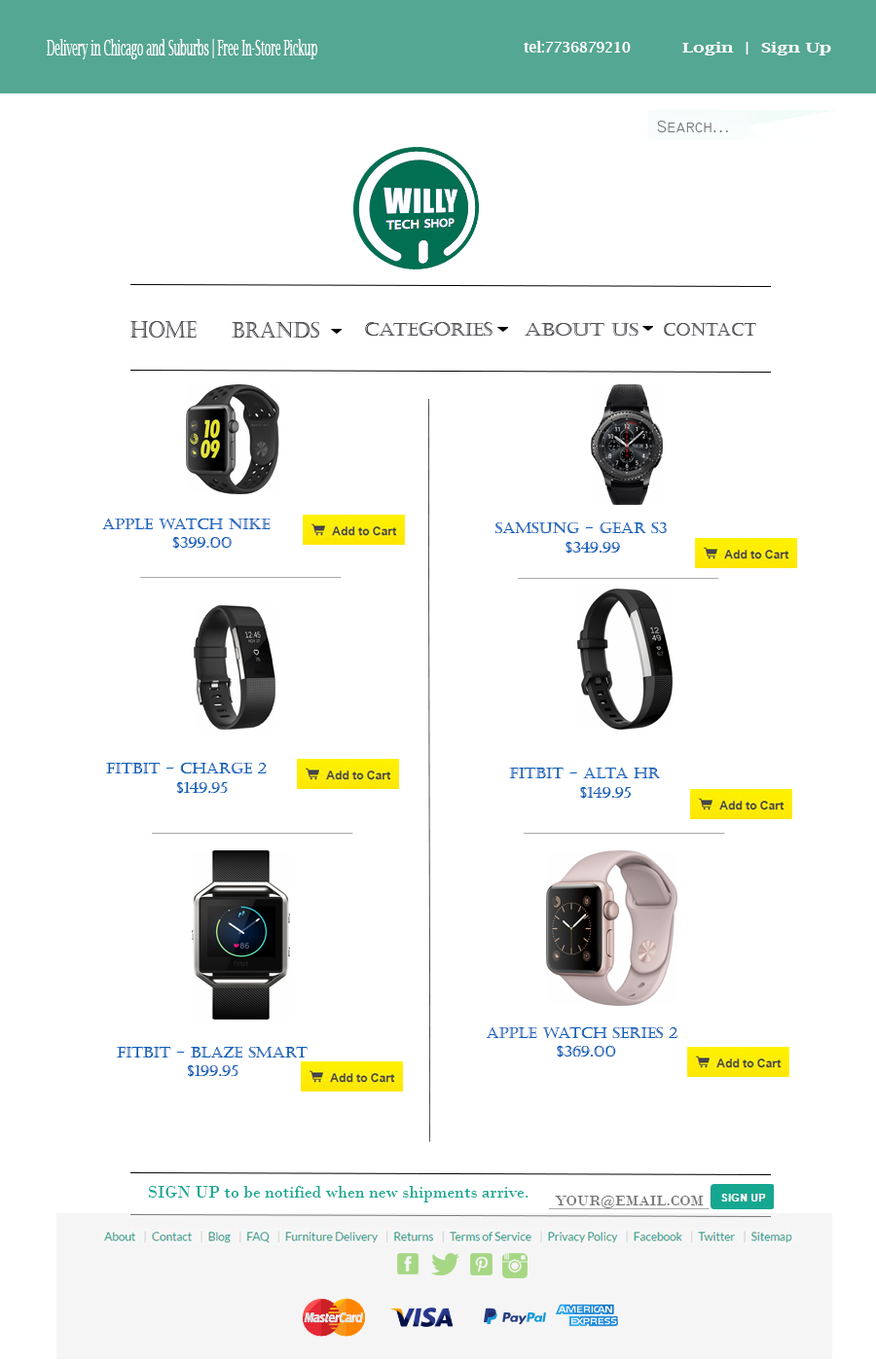
<style>
.page{position:relative;width:876px;height:1362px;background:#ffffff}
.page>*{position:absolute;margin:0}
.t1{font:21.8px "LucidaBright";color:#ffffff;scale:0.47 1}
.t2{font:14.5px "LucidaBright-Demi";color:#ffffff;scale:0.95 1}
.t3{font:13.9px "LucidaBright-Demi";color:#ffffff;scale:1.32 1}
.t4{font:11.2px "LucidaBright-Demi";color:#ffffff;scale:1.32 1}
.t5{font:17.5px "Technic";color:#757575}
.t6{font:23.1px "Castellar";color:#4e4e53;scale:0.84 1}
.t7{font:22.3px "Castellar";color:#4e4e53;scale:0.88 1}
.t8{font:18.8px "Castellar";color:#4e4e53}
.t9{font:17.1px "Castellar";color:#4e4e53;scale:1.18 1}
.t10{font:17.1px "Castellar";color:#4e4e53}
.t11{font:15.6px "Castellar";color:#085eb9}
.t12{font:17.5px "BodoniMT";color:#16a791}
.t13{font:15px "BodoniMT";color:#757575;scale:1.04 1}
</style>
<div class="page">
<p class="t1" style="left:47px;top:39px;width:270px;height:20px">Delivery in Chicago and Suburbs | Free In-Store Pickup</p>
<p class="t2" style="left:523px;top:41px;width:107px;height:12px">tel:7736879210</p>
<p class="t3" style="left:682px;top:42px;width:149px;height:13px"><span class="t4"><br></span>Login  |  Sign Up</p>
<p class="t5" style="left:657px;top:121px;width:71px;height:11px">Search...</p>
<p class="t6" style="left:130px;top:321px;width:67px;height:17px">HOME</p>
<p class="t7" style="left:232px;top:322px;width:87px;height:16px">BRANDS</p>
<p class="t8" style="left:365px;top:322px;width:127px;height:14px">cATEGORIES</p>
<p class="t9" style="left:524px;top:323px;width:114px;height:13px">ABOUT US</p>
<p class="t10" style="left:663px;top:323px;width:93px;height:13px">CONTACT</p>
<p class="t11" style="left:102px;top:519px;width:168px;height:30px">Apple Watch Nike<br>  $399.00</p>
<p class="t11" style="left:494px;top:522px;width:172px;height:32px">Samsung - Gear S3<br>  $349.99</p>
<p class="t11" style="left:106px;top:763px;width:161px;height:31px">Fitbit - Charge 2 <br>  $149.95</p>
<p class="t11" style="left:509px;top:768px;width:151px;height:31px">Fitbit - Alta HR<br>  $149.95</p>
<p class="t11" style="left:485px;top:1027px;width:192px;height:30px">Apple Watch Series 2<br>  $369.00</p>
<p class="t11" style="left:117px;top:1047px;width:190px;height:30px">Fitbit - Blaze Smart<br>  $199.95</p>
<p class="t12" style="left:148px;top:1186px;width:380px;height:16px">SIGN UP to be notified when new shipments arrive.</p>
<p class="t13" style="left:555px;top:1196px;width:148px;height:12px">YOUR@EMAIL.COM</p>
</div>
